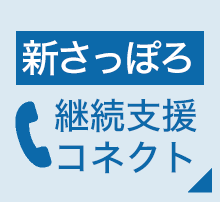
<style>
.page{position:relative;width:220px;height:202px;background:#dbe9f2}
.page>*{position:absolute;margin:0}
.t1{font:38px "HiraKakuStd-W5";letter-spacing:-0.1em;color:#ffffff}
.t2{font:36px/42px "HiraKakuStd-W5";color:#0c69aa}
</style>
<div class="page">
<p class="t1" style="left:22px;top:40px;width:169px;height:36px">新さっぽろ</p>
<p class="t2" style="left:55px;top:98px;width:142px;height:76px">継続支援<br>コネクト</p>
</div>
